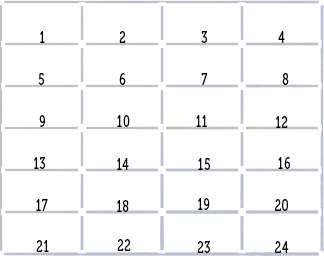
<style>
.page{position:relative;width:324px;height:256px;background:#ffffff}
.page>*{position:absolute;margin:0}
.t1{font:16.5px "Museo-300";letter-spacing:0.12em;color:#020202;scale:0.63 1}
</style>
<div class="page">
<p class="t1" style="left:40px;top:31px;width:5px;height:12px">1</p>
<p class="t1" style="left:119px;top:31px;width:7px;height:12px">2</p>
<p class="t1" style="left:201px;top:31px;width:6px;height:12px">3</p>
<p class="t1" style="left:278px;top:31px;width:7px;height:12px">4</p>
<p class="t1" style="left:38px;top:73px;width:6px;height:12px">5</p>
<p class="t1" style="left:119px;top:73px;width:7px;height:12px">6</p>
<p class="t1" style="left:201px;top:73px;width:7px;height:12px">7</p>
<p class="t1" style="left:282px;top:73px;width:7px;height:12px">8</p>
<p class="t1" style="left:39px;top:115px;width:6px;height:12px">9</p>
<p class="t1" style="left:117px;top:115px;width:13px;height:12px">10</p>
<p class="t1" style="left:196px;top:115px;width:11px;height:12px">11</p>
<p class="t1" style="left:276px;top:116px;width:12px;height:12px">12</p>
<p class="t1" style="left:34px;top:157px;width:11px;height:12px">13</p>
<p class="t1" style="left:117px;top:158px;width:12px;height:12px">14</p>
<p class="t1" style="left:198px;top:158px;width:12px;height:12px">15</p>
<p class="t1" style="left:278px;top:157px;width:12px;height:12px">16</p>
<p class="t1" style="left:198px;top:198px;width:12px;height:12px">19</p>
<p class="t1" style="left:36px;top:199px;width:12px;height:12px">17</p>
<p class="t1" style="left:117px;top:200px;width:12px;height:12px">18</p>
<p class="t1" style="left:275px;top:199px;width:13px;height:12px">20</p>
<p class="t1" style="left:36px;top:240px;width:13px;height:12px">21</p>
<p class="t1" style="left:117px;top:239px;width:14px;height:12px">22</p>
<p class="t1" style="left:197px;top:241px;width:13px;height:12px">23</p>
<p class="t1" style="left:275px;top:241px;width:14px;height:12px">24</p>
</div>
